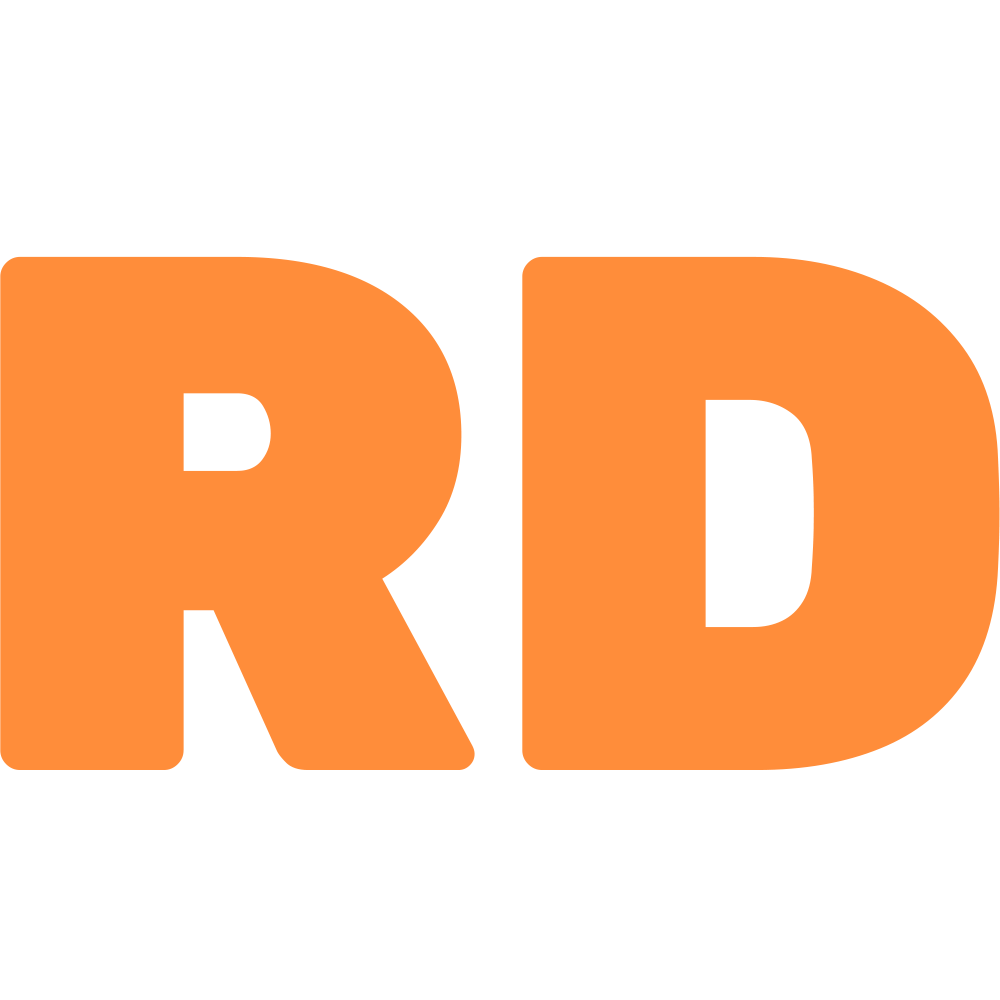
<style>
.page{position:relative;width:1000px;height:1000px;background:#ffffff}
.page>*{position:absolute;margin:0}
.t1{font:733px "Rubik-Black";letter-spacing:-0.01em;color:#ff8d3a}
</style>
<div class="page">
<p class="t1" style="left:0px;top:256px;width:1000px;height:514px">RD</p>
</div>
